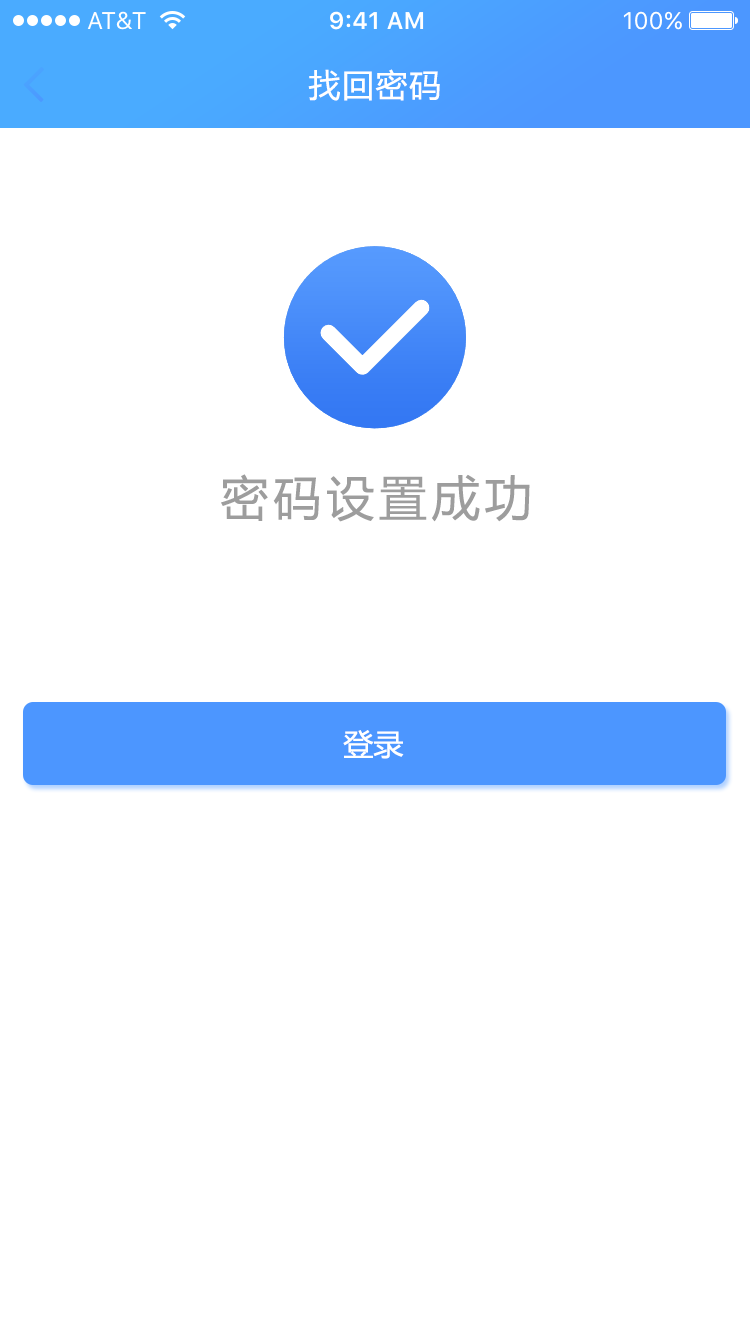
<style>
.page{position:relative;width:750px;height:1334px;background:#ffffff}
.page>*{position:absolute;margin:0}
.t1{font:32px "MicrosoftYaHei";letter-spacing:0.05em;color:#ffffff}
.t2{font:48px "MicrosoftYaHei";letter-spacing:0.1em;color:#9d9d9d}
.t3{font:30px "MicrosoftYaHei";color:#ffffff}
</style>
<div class="page">
<p class="t1" style="left:308px;top:69px;width:132px;height:32px">找回密码</p>
<p class="t2" style="left:221px;top:474px;width:309px;height:48px">密码设置成功</p>
<p class="t3" style="left:343px;top:730px;width:61px;height:29px">登录</p>
</div>
